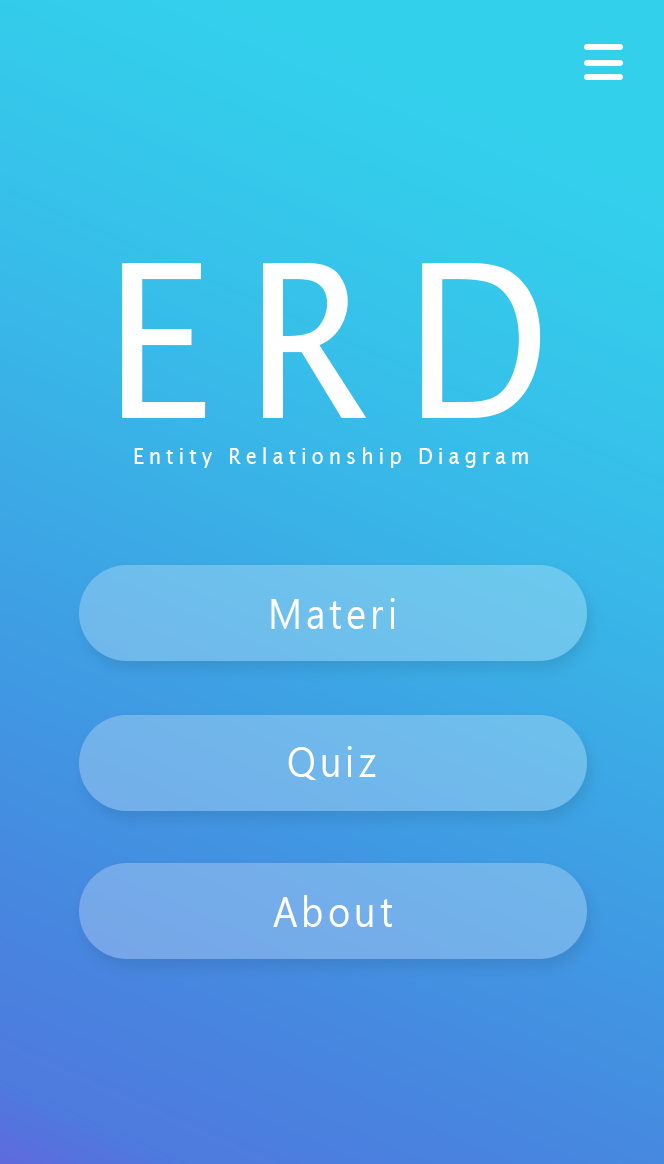
<style>
.page{position:relative;width:664px;height:1164px}
.page>*{position:absolute;margin:0}
.t1{font:215.5px "LucidaSans";letter-spacing:0.18em;color:#ffffff;scale:0.91 1}
.t2{font:21.9px "LucidaSans";letter-spacing:0.25em;color:#ffffff;scale:0.91 1}
.t3{font:41.7px "SegoeUI";letter-spacing:0.11em;color:#ffffff;scale:0.91 1}
</style>
<div class="page">
<p class="t1" style="left:122px;top:263px;width:419px;height:155px">ERD</p>
<p class="t2" style="left:134px;top:447px;width:394px;height:21px">Entity Relationship Diagram</p>
<p class="t3" style="left:271px;top:598px;width:124px;height:31px">Materi</p>
<p class="t3" style="left:288px;top:746px;width:88px;height:34px">Quiz</p>
<p class="t3" style="left:273px;top:895px;width:119px;height:32px">About</p>
</div>
